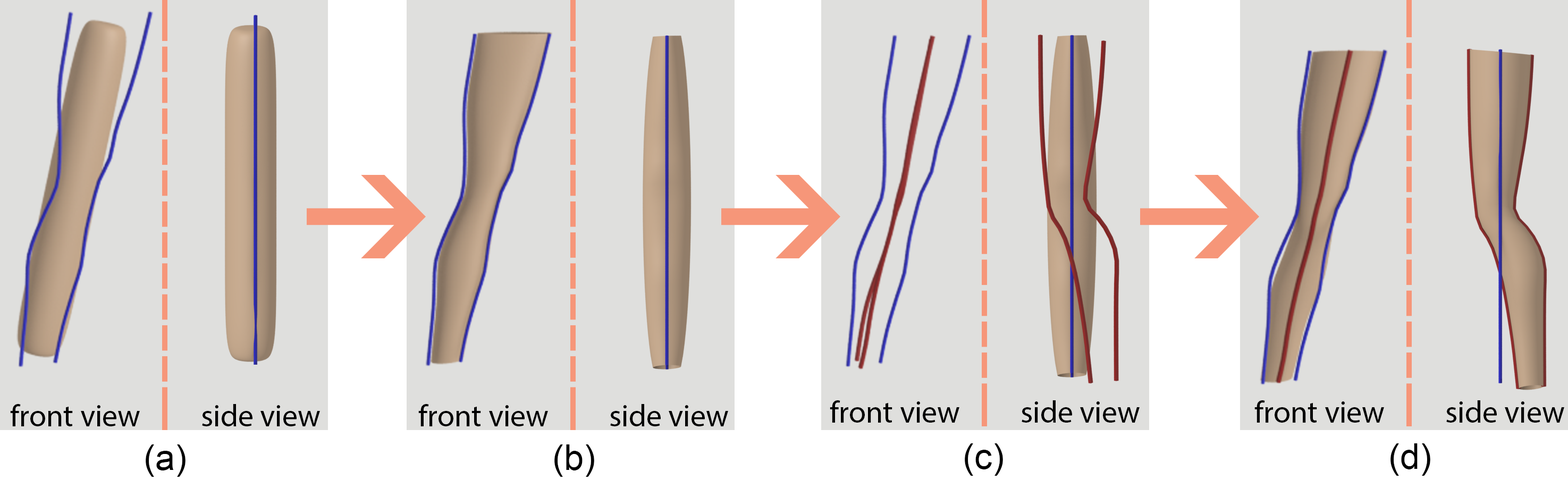
<style>
.page{position:relative;width:1568px;height:488px;background:#dfdfdd}
.page>*{position:absolute;margin:0}
.t1{font:31px "MyriadPro-Regular";color:#000000}
.t2{font:35.4px "ArialMT";color:#000000}
</style>
<div class="page">
<p class="t1" style="left:830px;top:400px;width:129px;height:23px">front view</p>
<p class="t1" style="left:1022px;top:400px;width:118px;height:23px">side view</p>
<p class="t1" style="left:1254px;top:400px;width:130px;height:23px">front view</p>
<p class="t1" style="left:1446px;top:400px;width:118px;height:23px">side view</p>
<p class="t1" style="left:10px;top:404px;width:130px;height:22px">front view</p>
<p class="t1" style="left:202px;top:404px;width:118px;height:22px">side view</p>
<p class="t1" style="left:418px;top:404px;width:130px;height:22px">front view</p>
<p class="t1" style="left:610px;top:404px;width:118px;height:22px">side view</p>
<p class="t2" style="left:146px;top:444px;width:40px;height:33px">(a)</p>
<p class="t2" style="left:554px;top:444px;width:40px;height:33px">(b)</p>
<p class="t2" style="left:965px;top:443px;width:38px;height:33px">(c)</p>
<p class="t2" style="left:1390px;top:443px;width:40px;height:33px">(d)</p>
</div>
